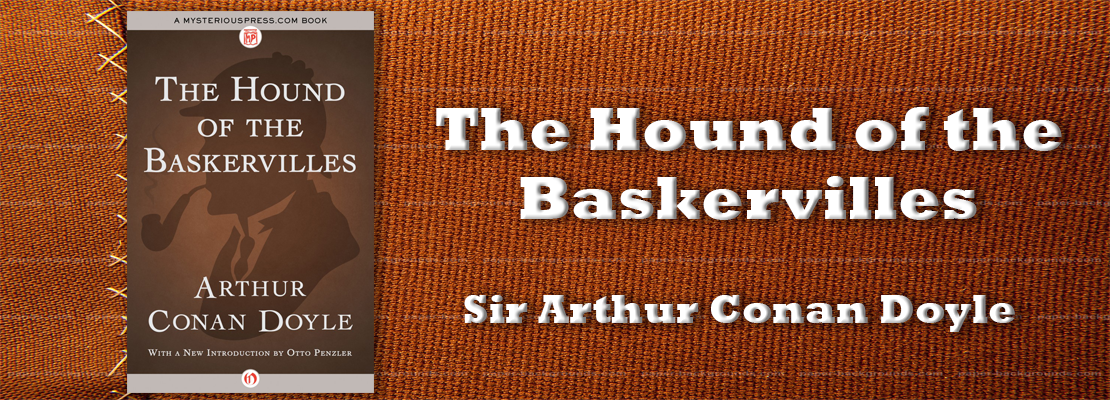
<style>
.page{position:relative;width:1110px;height:400px}
.page>*{position:absolute;margin:0}
.t1{font:62px/69px "Rockwell-ExtraBold";color:#ffffff}
.t2{font:41px "Rockwell-ExtraBold"}
</style>
<div class="page">
<p class="t1" style="left:436px;top:107px;width:626px;height:113px;text-align:center">The Hound of the Baskervilles</p>
<p class="t2" style="left:464px;top:295px;width:551px;height:37px">Sir Arthur Conan Doyle</p>
</div>
